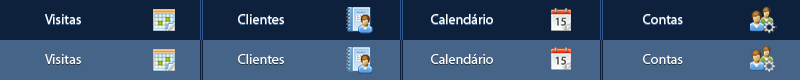
<style>
.page{position:relative;width:800px;height:80px;background:#466388}
.page>*{position:absolute;margin:0}
.t1{font:14px "MyriadPro-Regular";color:#fffefe}
.t2{font:14px "MyriadPro-Regular";color:#fefefe}
.t3{font:14px "MyriadPro-Regular";color:#ffffff}
</style>
<div class="page">
<p class="t1" style="left:45px;top:14px;width:36px;height:10px">Visitas</p>
<p class="t1" style="left:238px;top:14px;width:46px;height:10px">Clientes</p>
<p class="t1" style="left:431px;top:14px;width:62px;height:10px">Calendário</p>
<p class="t1" style="left:643px;top:14px;width:40px;height:10px">Contas</p>
<p class="t2" style="left:45px;top:54px;width:36px;height:10px">Visitas</p>
<p class="t3" style="left:238px;top:54px;width:46px;height:10px">Clientes</p>
<p class="t3" style="left:431px;top:54px;width:62px;height:10px">Calendário</p>
<p class="t3" style="left:643px;top:54px;width:40px;height:10px">Contas</p>
</div>
